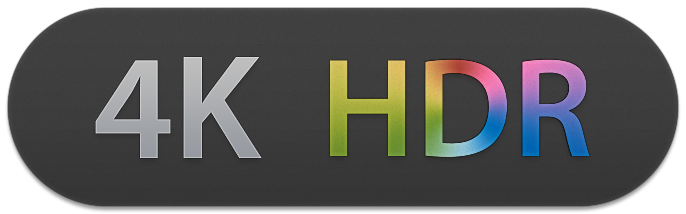
<style>
.page{position:relative;width:686px;height:214px}
.page>*{position:absolute;margin:0}
.t1{font:150px "MyriadPro-Semibold";color:#acaeb1}
.t2{font:142px "MyriadPro-Semibold"}
</style>
<div class="page">
<p class="t1" style="left:95px;top:57px;width:167px;height:101px">4K</p>
<p class="t2" style="left:330px;top:59px;width:260px;height:98px">HDR</p>
</div>
